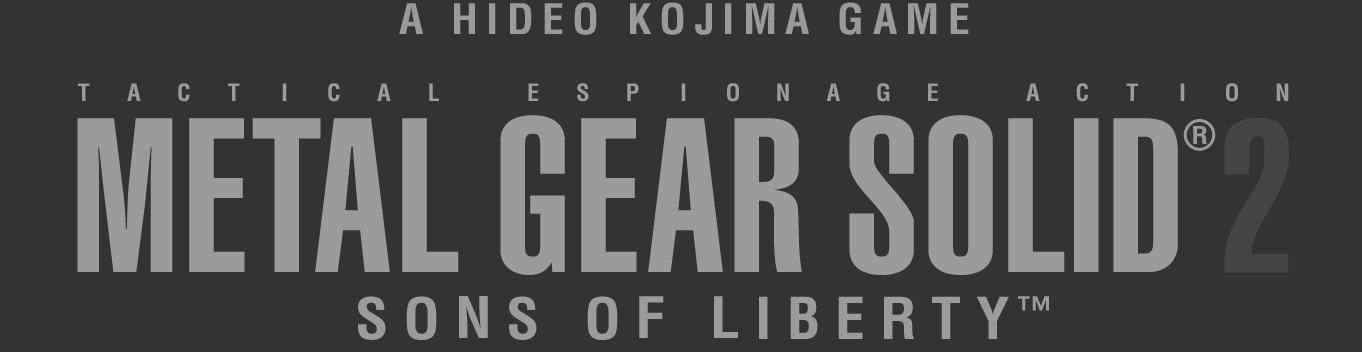
<style>
.page{position:relative;width:1362px;height:352px;background:#333333}
.page>*{position:absolute;margin:0}
.t1{font:41.1px "Helvetica-Condensed-Bold";letter-spacing:0.188em;color:#9a9a9a;scale:1.07 1}
.t2{font:23.3px "Helvetica-Condensed-Bold";letter-spacing:0.048em;color:#9b9b9b;scale:1.05 1}
.t3{font:216px "Helvetica-UltraCompressed";letter-spacing:0.048em;color:#9b9b9b;scale:1.07 1}
.t4{font:40.4px "Helvetica-Condensed-Bold";letter-spacing:0.048em;color:#9b9b9b}
.t5{font:23.9px "Helvetica-Condensed-Bold";letter-spacing:0.048em;color:#9b9b9b;scale:1.14 1}
.t6{font:213.7px "Helvetica-UltraCompressed";letter-spacing:0.048em;color:#565656;scale:1.09 1}
.t7{font:55.2px "Helvetica-Condensed-Bold";letter-spacing:0.048em;color:#9b9b9b;scale:1.09 1}
.t8{font:56.1px "Helvetica-Condensed-Bold";letter-spacing:0.048em;color:#9b9b9b;scale:1.07 1}
.t9{font:55.8px "Helvetica-Condensed-Bold";letter-spacing:0.048em;color:#9b9b9b;scale:1.08 1}
.t10{font:55.6px "Helvetica-Condensed-Bold";letter-spacing:0.048em;color:#9b9b9b;scale:1.08 1}
.t11{font:56.2px "Helvetica-Condensed-Bold";letter-spacing:0.048em;color:#9b9b9b;scale:1.07 1}
.t12{font:34.9px "Helvetica-UltraCompressed";letter-spacing:0.048em;color:#9b9b9b}
</style>
<div class="page">
<p class="t1" style="left:399px;top:2px;width:570px;height:33px">A HIDEO KOJIMA GAME</p>
<p class="t2" style="left:78px;top:83px;width:12px;height:18px">T</p>
<p class="t2" style="left:127px;top:83px;width:14px;height:18px">A</p>
<p class="t2" style="left:178px;top:83px;width:12px;height:19px">C</p>
<p class="t2" style="left:228px;top:83px;width:12px;height:18px">T</p>
<p class="t2" style="left:282px;top:83px;width:5px;height:18px">I</p>
<p class="t2" style="left:328px;top:83px;width:12px;height:19px">C</p>
<p class="t2" style="left:377px;top:83px;width:14px;height:18px">A</p>
<p class="t2" style="left:429px;top:83px;width:10px;height:18px">L</p>
<p class="t2" style="left:528px;top:83px;width:11px;height:18px">E</p>
<p class="t2" style="left:577px;top:83px;width:12px;height:19px">S</p>
<p class="t2" style="left:627px;top:83px;width:12px;height:18px">P</p>
<p class="t2" style="left:681px;top:83px;width:5px;height:18px">I</p>
<p class="t2" style="left:727px;top:83px;width:12px;height:19px">O</p>
<p class="t2" style="left:777px;top:83px;width:12px;height:18px">N</p>
<p class="t2" style="left:826px;top:83px;width:14px;height:18px">A</p>
<p class="t2" style="left:877px;top:83px;width:13px;height:19px">G</p>
<p class="t2" style="left:928px;top:83px;width:10px;height:18px">E</p>
<p class="t2" style="left:1026px;top:83px;width:14px;height:18px">A</p>
<p class="t2" style="left:1076px;top:83px;width:12px;height:19px">C</p>
<p class="t2" style="left:1126px;top:83px;width:12px;height:18px">T</p>
<p class="t2" style="left:1180px;top:83px;width:5px;height:18px">I</p>
<p class="t2" style="left:1226px;top:83px;width:12px;height:19px">O</p>
<p class="t2" style="left:1276px;top:83px;width:13px;height:18px">N</p>
<p class="t3" style="left:77px;top:118px;width:96px;height:154px">M</p>
<p class="t3" style="left:189px;top:118px;width:56px;height:154px">E</p>
<p class="t3" style="left:252px;top:118px;width:69px;height:154px">T</p>
<p class="t3" style="left:315px;top:118px;width:75px;height:154px">A</p>
<p class="t3" style="left:402px;top:118px;width:57px;height:154px">L</p>
<p class="t3" style="left:500px;top:115px;width:65px;height:160px">G</p>
<p class="t3" style="left:581px;top:118px;width:56px;height:154px">E</p>
<p class="t3" style="left:648px;top:118px;width:75px;height:154px">A</p>
<p class="t3" style="left:734px;top:118px;width:68px;height:154px">R</p>
<p class="t3" style="left:849px;top:115px;width:65px;height:160px">S</p>
<p class="t3" style="left:928px;top:115px;width:65px;height:160px">O</p>
<p class="t3" style="left:1008px;top:118px;width:57px;height:154px">L</p>
<p class="t3" style="left:1074px;top:118px;width:25px;height:154px">I</p>
<p class="t3" style="left:1113px;top:118px;width:65px;height:154px">D</p>
<p class="t4" style="left:1183px;top:119px;width:33px;height:32px">®</p>
<p class="t5" style="left:1193px;top:126px;width:14px;height:18px">R</p>
<p class="t6" style="left:1224px;top:117px;width:65px;height:156px">2</p>
<p class="t7" style="left:358px;top:296px;width:28px;height:44px">S</p>
<p class="t7" style="left:406px;top:296px;width:31px;height:44px">O</p>
<p class="t8" style="left:459px;top:296px;width:29px;height:42px">N</p>
<p class="t7" style="left:509px;top:296px;width:28px;height:44px">S</p>
<p class="t7" style="left:587px;top:296px;width:31px;height:44px">O</p>
<p class="t9" style="left:639px;top:296px;width:25px;height:42px">F</p>
<p class="t10" style="left:714px;top:296px;width:24px;height:42px">L</p>
<p class="t11" style="left:759px;top:296px;width:9px;height:43px">I</p>
<p class="t11" style="left:790px;top:296px;width:28px;height:43px">B</p>
<p class="t11" style="left:838px;top:296px;width:25px;height:43px">E</p>
<p class="t11" style="left:884px;top:296px;width:30px;height:43px">R</p>
<p class="t11" style="left:932px;top:296px;width:28px;height:43px">T</p>
<p class="t11" style="left:976px;top:296px;width:33px;height:43px">Y</p>
<p class="t12" style="left:1018px;top:296px;width:31px;height:15px">™</p>
</div>
